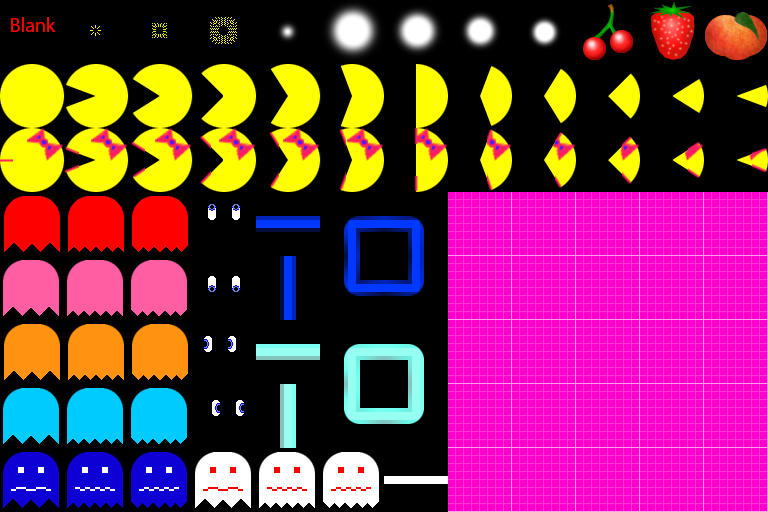
<style>
.page{position:relative;width:768px;height:512px;background:#000000}
.page>*{position:absolute;margin:0}
.t1{font:20px "MyriadPro-Regular";color:#ff0000}
</style>
<div class="page">
<p class="t1" style="left:11px;top:17px;width:45px;height:15px">Blank</p>
</div>
